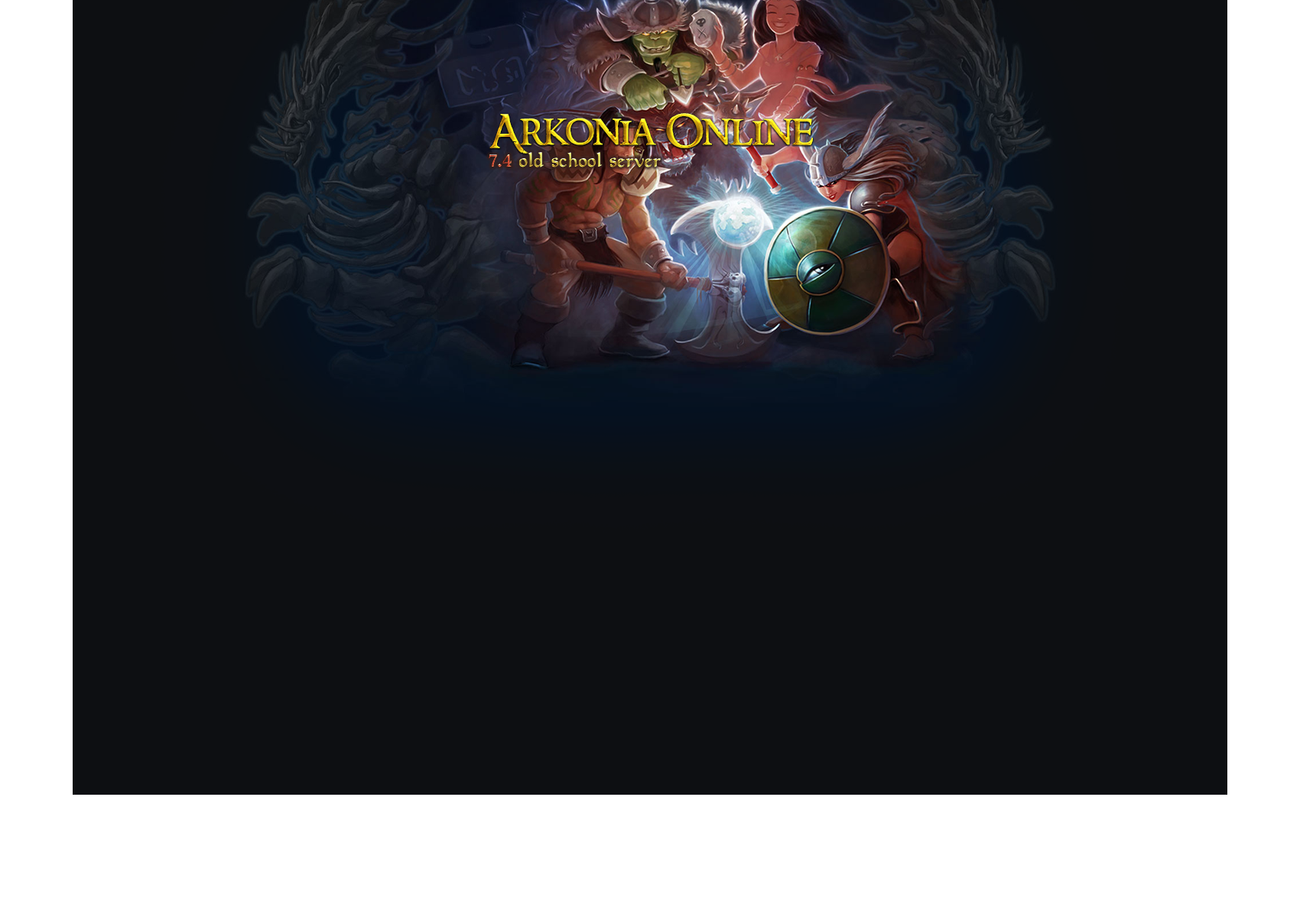
<style>
.page{position:relative;width:1300px;height:917px;background:#0d0f12}
.page>*{position:absolute;margin:0}
.t1{font:42px "RingbearerMedium"}
.t2{font:20.6px "Planewalker"}
</style>
<div class="page">
<p class="t1" style="left:489px;top:113px;width:324px;height:41px">Arkonia Online</p>
<p class="t2" style="left:489px;top:152px;width:172px;height:15px">7.4 old school server</p>
</div>
